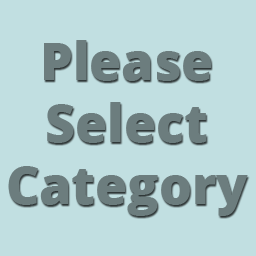
<style>
.page{position:relative;width:256px;height:256px;background:#c1dfe1}
.page>*{position:absolute;margin:0}
.t1{font:51.8px "OpenSans-Extrabold";color:#6c7d7e}
</style>
<div class="page">
<p class="t1" style="left:8px;top:40px;width:240px;height:176px;text-align:center">Please<br>Select<br>Category</p>
</div>
